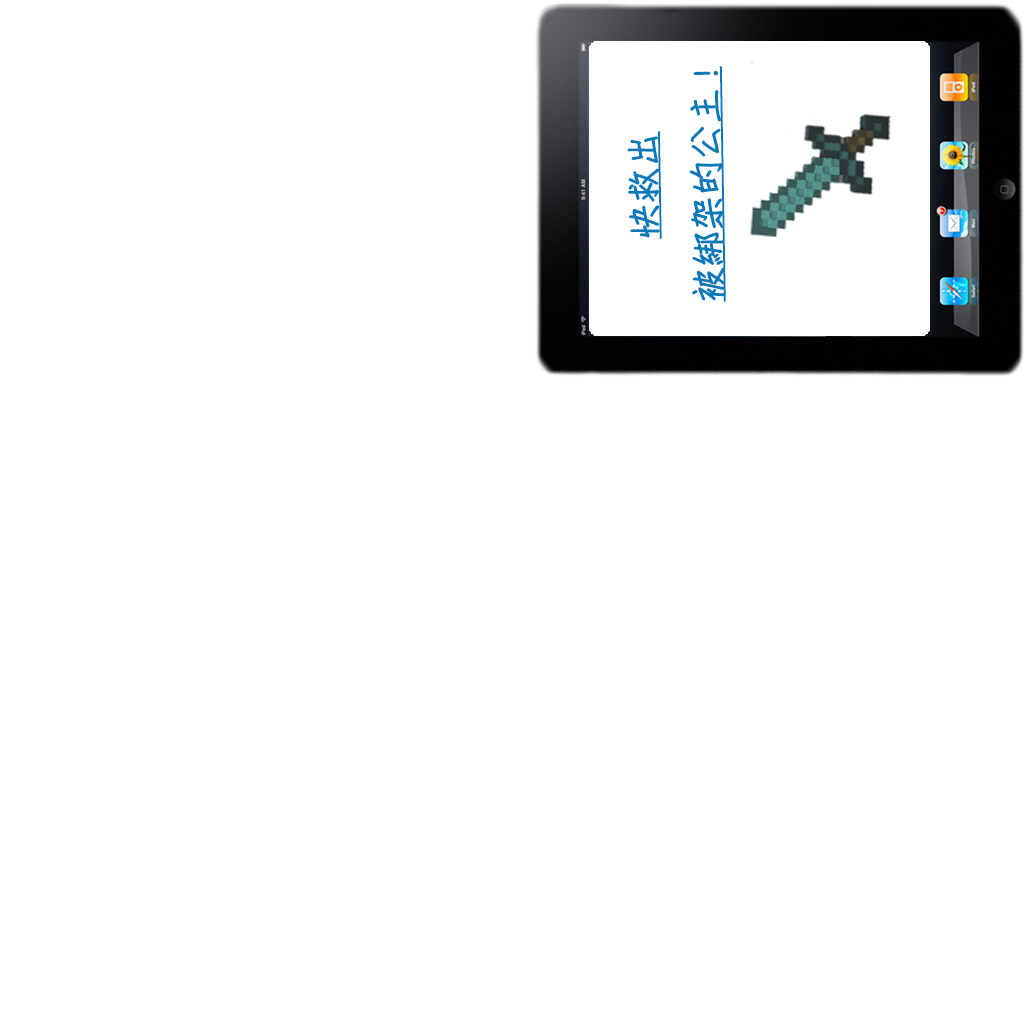
<style>
.page{position:relative;width:1024px;height:1024px;background:#ffffff}
.page>*{position:absolute;margin:0}
.t1{font:36px "DFChu-W4-WINP-BF";color:#0979ba;font-weight:bold;text-decoration:underline;scale:0.97 1}
</style>
<div class="page">
<p class="t1" style="left:627px;top:66px;width:99px;height:236px;text-align:center;rotate:-91deg">快救出<br>被綁架的公主!</p>
</div>
